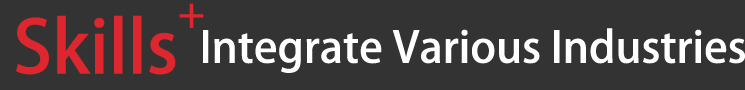
<style>
.page{position:relative;width:745px;height:90px;background:#333333}
.page>*{position:absolute;margin:0}
.t1{font:39.3px "AdobeHeitiStd-Regular";color:#de262e}
.t2{font:72px "AdobeHeitiStd-Regular";color:#de262e}
.t3{font:42.8px "AdobeHeitiStd-Regular";color:#ffffff}
</style>
<div class="page">
<p class="t1" style="left:179px;top:3px;width:25px;height:25px">+</p>
<p class="t2" style="left:16px;top:15px;width:160px;height:60px">Skills</p>
<p class="t3" style="left:203px;top:28px;width:542px;height:45px">Integrate Various Industries</p>
</div>
